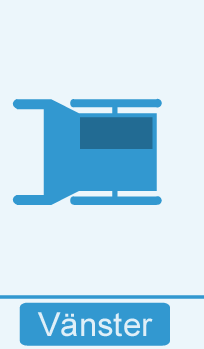
<style>
.page{position:relative;width:204px;height:349px;background:#ecf6fb}
.page>*{position:absolute;margin:0}
.t1{font:33px "ArialMT";color:#dfeff8}
</style>
<div class="page">
<p class="t1" style="left:37px;top:312px;width:116px;height:25px">Vänster</p>
</div>
